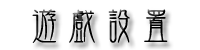
<style>
.page{position:relative;width:200px;height:50px;background:#ffffff}
.page>*{position:absolute;margin:0}
.t1{font:36px "DFJinWen-W3-WIN-BF";color:#000000;font-weight:bold}
</style>
<div class="page">
<p class="t1" style="left:32px;top:9px;width:136px;height:34px">遊戲設置</p>
</div>
